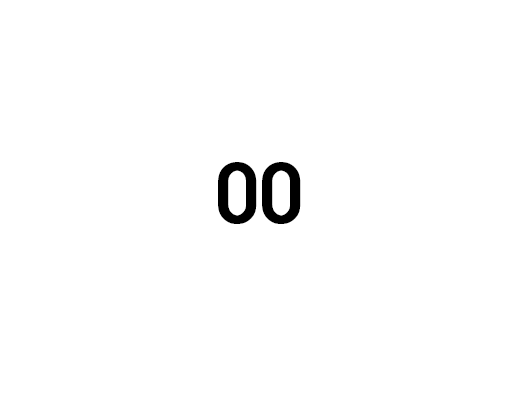
<style>
.page{position:relative;width:520px;height:400px;background:#ffffff}
.page>*{position:absolute;margin:0}
.t1{font:80px "EFUTURE1_M";color:#000000;font-weight:bold}
</style>
<div class="page">
<p class="t1" style="left:218px;top:162px;width:83px;height:62px">00</p>
</div>
